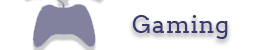
<style>
.page{position:relative;width:273px;height:50px;background:#ffffff}
.page>*{position:absolute;margin:0}
.t1{font:24px "Arvo";letter-spacing:0.02em;color:#37396f}
</style>
<div class="page">
<p class="t1" style="left:132px;top:15px;width:96px;height:24px">Gaming</p>
</div>
